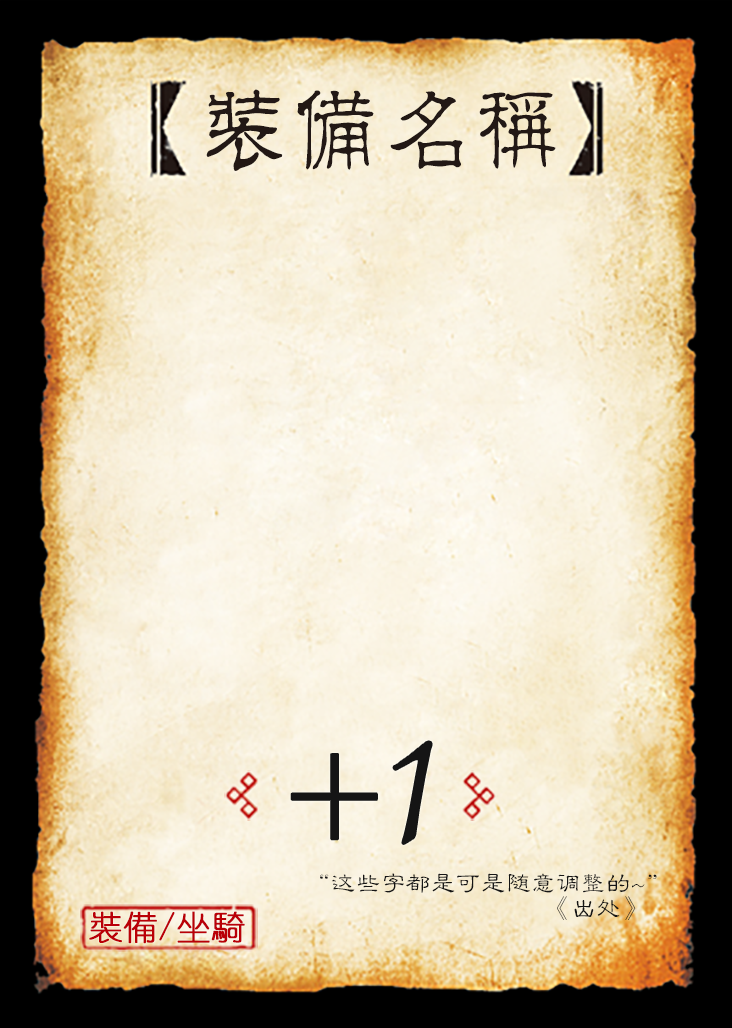
<style>
.page{position:relative;width:732px;height:1028px}
.page>*{position:absolute;margin:0}
.t1{font:95.8px "JMFLS_GBK";color:#221815;scale:0.95 1}
.t2{font:191.7px "Jxixinkai";color:#151515}
.t3{font:141.7px "Jxixinkai";color:#151515}
.t4{font:25px/25px "FZLBJW--GB1-0";color:#151515}
.t5{font:33.3px "YouYuan";color:#ba0007;font-weight:bold}
</style>
<div class="page">
<p class="t1" style="left:206px;top:89px;width:350px;height:82px">装备名称</p>
<p class="t2" style="left:393px;top:741px;width:39px;height:103px">1</p>
<p class="t3" style="left:291px;top:754px;width:86px;height:86px">+</p>
<p class="t4" style="left:320px;top:873px;width:337px;height:47px;text-align:right">“这些字都是可是随意调整的~”<br>                                      《出处》</p>
<p class="t5" style="left:89px;top:911px;width:156px;height:33px">裝備/坐騎</p>
</div>
